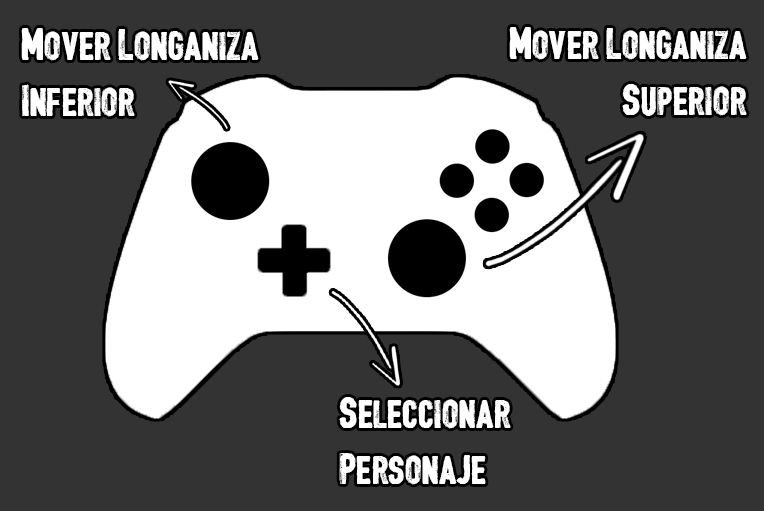
<style>
.page{position:relative;width:764px;height:511px;background:#333333}
.page>*{position:absolute;margin:0}
.t1{font:47px "CFJacquesParizeau-Regular";color:#fffefe}
</style>
<div class="page">
<p class="t1" style="left:21px;top:28px;width:238px;height:89px">Mover Longaniza<br>Inferior</p>
<p class="t1" style="left:509px;top:27px;width:238px;height:89px;text-align:right">Mover Longaniza<br>Superior</p>
<p class="t1" style="left:339px;top:397px;width:172px;height:88px">Seleccionar <br>Personaje</p>
</div>
